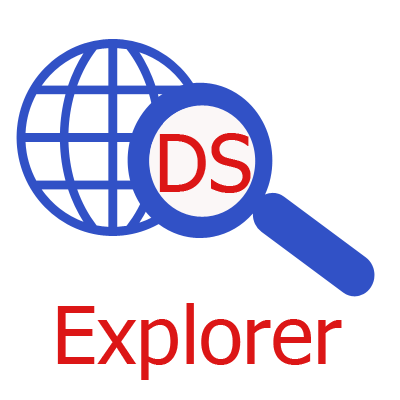
<style>
.page{position:relative;width:400px;height:400px;background:#ffffff}
.page>*{position:absolute;margin:0}
.t1{font:80px "Tahoma";color:#dc1616}
</style>
<div class="page">
<p class="t1" style="left:159px;top:133px;width:92px;height:60px">DS</p>
<p class="t1" style="left:57px;top:303px;width:285px;height:77px">Explorer</p>
</div>
